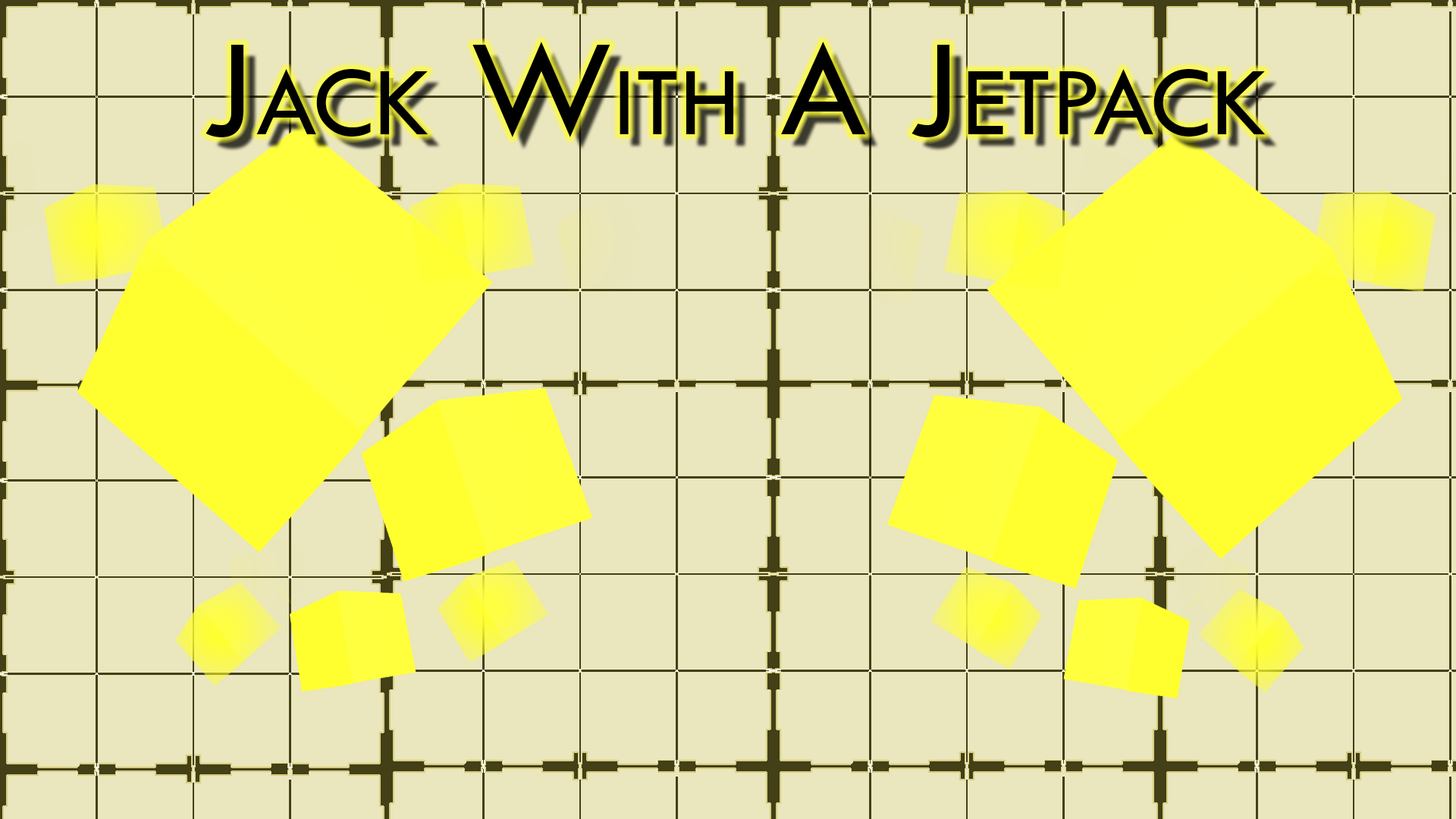
<style>
.page{position:relative;width:1456px;height:819px;background:#eae6bd}
.page>*{position:absolute;margin:0}
.t1{font:144.1px "TwCenMT-Regular";color:#000000;font-variant:small-caps}
</style>
<div class="page">
<p class="t1" style="left:206px;top:42px;width:1059px;height:95px">Jack With A Jetpack</p>
</div>
